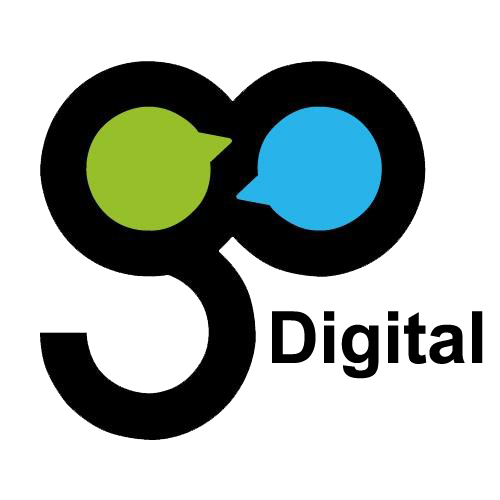
<style>
.page{position:relative;width:500px;height:500px;background:#ffffff}
.page>*{position:absolute;margin:0}
.t1{font:72px "Arial-BoldMT";color:#000000}
</style>
<div class="page">
<p class="t1" style="left:272px;top:311px;width:211px;height:68px">Digital</p>
</div>
